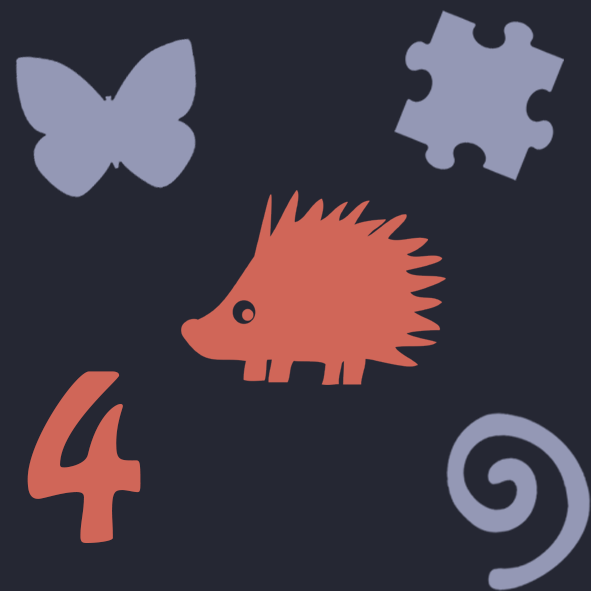
<style>
.page{position:relative;width:591px;height:591px;background:#252733}
.page>*{position:absolute;margin:0}
.t1{font:208.3px "HoboStd";color:#d06658}
</style>
<div class="page">
<p class="t1" style="left:27px;top:371px;width:114px;height:172px">4</p>
</div>
